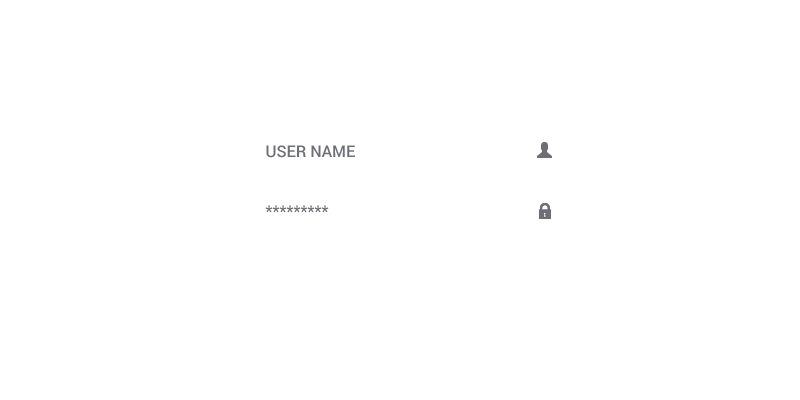
<style>
.page{position:relative;width:800px;height:400px;background:#ffffff}
.page>*{position:absolute;margin:0}
.t1{font:16px "Roboto-Medium";color:#6d6e76}
</style>
<div class="page">
<p class="t1" style="left:266px;top:145px;width:89px;height:13px">USER NAME</p>
<p class="t1" style="left:265px;top:205px;width:64px;height:8px">*********</p>
</div>
